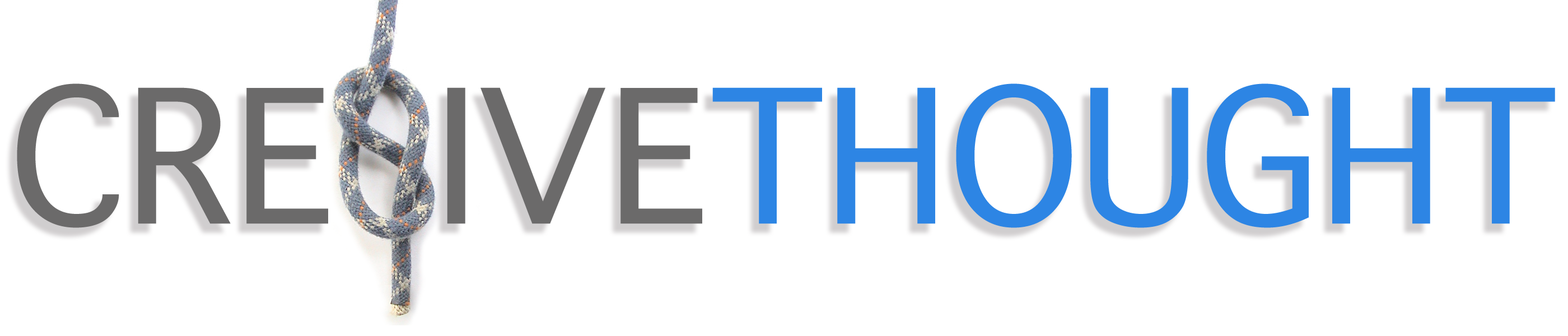
<style>
.page{position:relative;width:1568px;height:336px;background:#ffffff}
.page>*{position:absolute;margin:0}
.t1{font:252px "AppleSymbols";color:#6b6a6a}
.t2{font:252px "AppleSymbols";color:#2d85e4}
</style>
<div class="page">
<p class="t1" style="left:17px;top:83px;width:311px;height:145px">CRE</p>
<p class="t1" style="left:447px;top:87px;width:255px;height:137px">IVE</p>
<p class="t2" style="left:712px;top:83px;width:843px;height:145px">THOUGHT</p>
</div>
